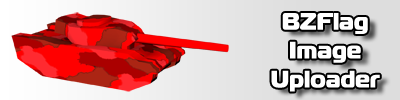
<style>
.page{position:relative;width:400px;height:100px}
.page>*{position:absolute;margin:0}
.t1{font:24px "MagistralBlackC";color:#ffffff}
</style>
<div class="page">
<p class="t1" style="left:271px;top:13px;width:109px;height:79px;text-align:center">BZFlag Image Uploader</p>
</div>
